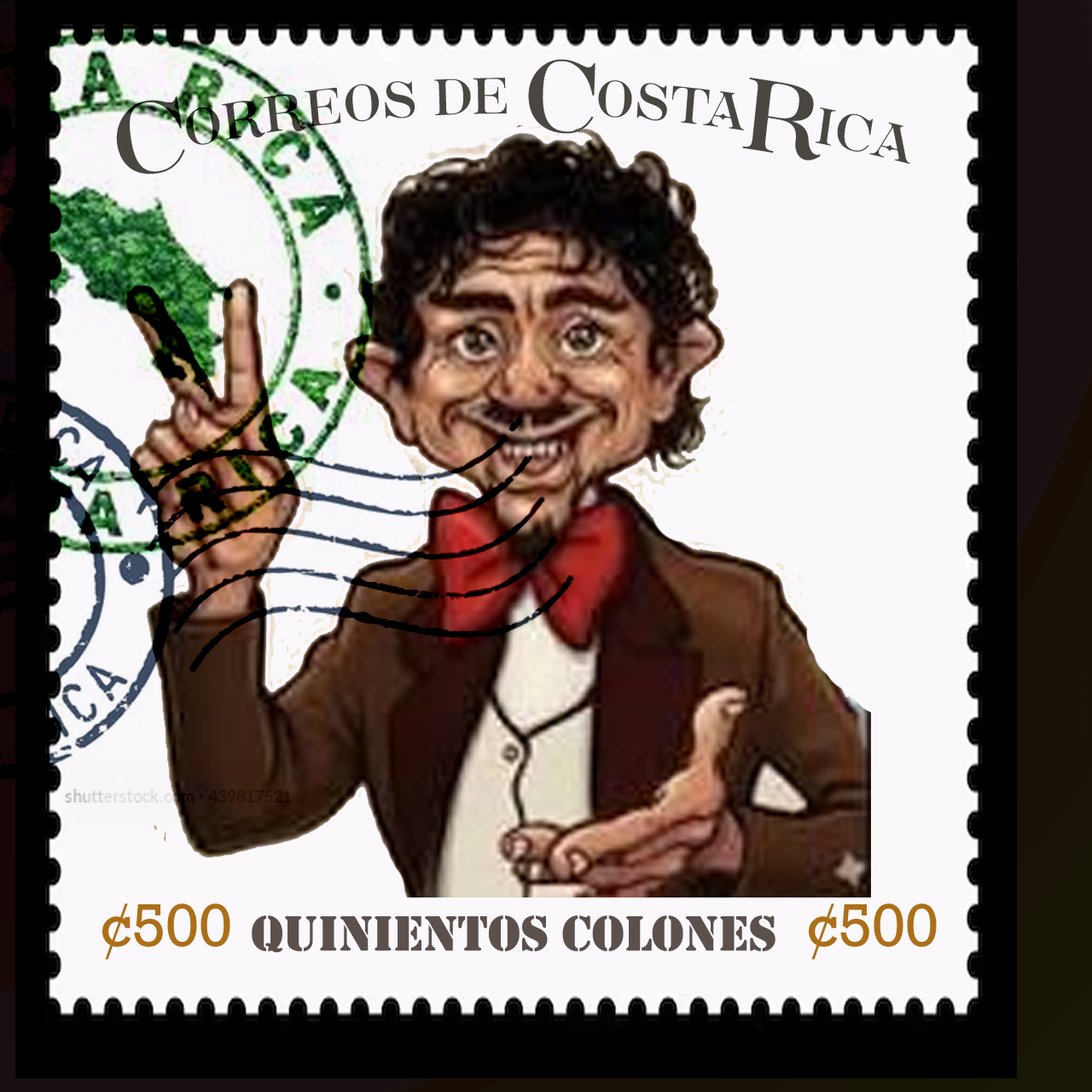
<style>
.page{position:relative;width:1092px;height:1092px;background:#faf8fb}
.page>*{position:absolute;margin:0}
.t1{font:88.4px "SaintCarellCleanPERSONAL-Regular";color:#4a4743;scale:0.83 1}
.t2{font:61.4px "Rockwell";color:#ac6f18}
.t3{font:51.2px "Stencil";color:#5c504d}
</style>
<div class="page">
<p class="t1" style="left:116px;top:59px;width:794px;height:115px">Correos de CostaRica</p>
<p class="t2" style="left:102px;top:903px;width:128px;height:57px">¢500</p>
<p class="t2" style="left:809px;top:903px;width:128px;height:57px">¢500</p>
<p class="t3" style="left:252px;top:915px;width:523px;height:38px">quinientos colones</p>
</div>
